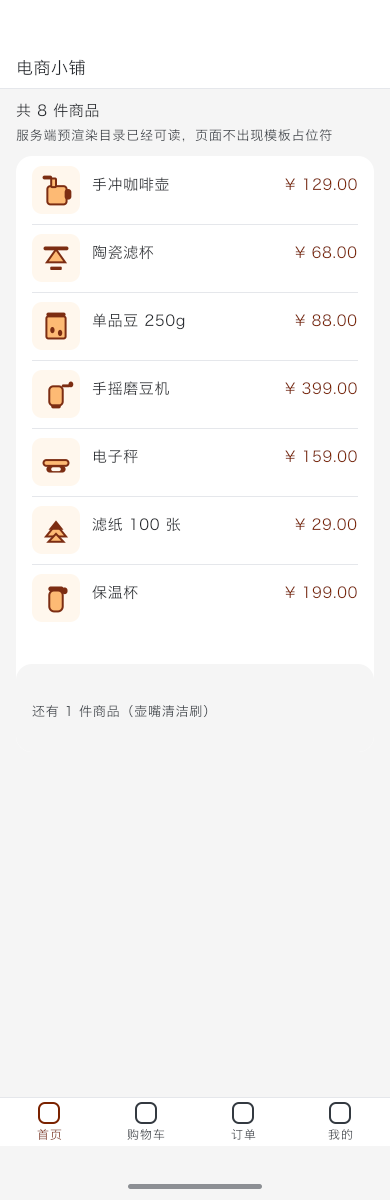
<style>
.page{position:relative;width:390px;height:1200px;background:#f5f5f5}
.page>*{position:absolute;margin:0}
.t1{font:17px "HiraginoSansGB-Regular";letter-spacing:0.03em;color:#1f2329}
.t2{font:15px "HiraginoSansGB-Regular";letter-spacing:0.04em;color:#26292f}
.t3{font:13px "HiraginoSansGB-Regular";letter-spacing:0.06em;color:#333940}
.t4{font:15px "HiraginoSansGB-Regular";letter-spacing:0.04em;color:#282b31}
.t5{font:15px "HiraginoSansGB-Regular";letter-spacing:0.04em;color:#7b2603}
.t6{font:15px "HiraginoSansGB-Regular";letter-spacing:0.04em;color:#23272c}
.t7{font:15px "HiraginoSansGB-Regular";letter-spacing:0.04em;color:#25282e}
.t8{font:15px "HiraginoSansGB-Regular";letter-spacing:0.04em;color:#2c2f34}
.t9{font:15px "HiraginoSansGB-Regular";letter-spacing:0.04em;color:#7c2705}
.t10{font:15px "HiraginoSansGB-Regular";letter-spacing:0.04em;color:#2d3035}
.t11{font:15px "HiraginoSansGB-Regular";letter-spacing:0.04em;color:#7b2604}
.t12{font:15px "HiraginoSansGB-Regular";letter-spacing:0.04em;color:#282c31}
.t13{font:15px "HiraginoSansGB-Regular";letter-spacing:0.04em;color:#24282d}
.t14{font:15px "HiraginoSansGB-Regular";letter-spacing:0.04em;color:#7b2502}
.t15{font:13px "HiraginoSansGB-Regular";letter-spacing:0.06em;color:#474c51}
.t16{font:12px "HiraginoSansGB-Regular";letter-spacing:0.08em}
.t17{font:12px "HiraginoSansGB-Regular";letter-spacing:0.08em;color:#43484e}
</style>
<div class="page">
<p class="t1" style="left:17px;top:59px;width:69px;height:18px">电商小铺</p>
<p class="t2" style="left:15px;top:103px;width:85px;height:16px">共 8 件商品</p>
<p class="t3" style="left:15px;top:128px;width:318px;height:15px">服务端预渲染目录已经可读，页面不出现模板占位符</p>
<p class="t4" style="left:91px;top:177px;width:79px;height:15px">手冲咖啡壶</p>
<p class="t5" style="left:284px;top:178px;width:74px;height:14px">¥ 129.00</p>
<p class="t6" style="left:92px;top:245px;width:63px;height:16px">陶瓷滤杯</p>
<p class="t5" style="left:294px;top:246px;width:64px;height:14px">¥ 68.00</p>
<p class="t7" style="left:91px;top:313px;width:95px;height:18px">单品豆 250g</p>
<p class="t5" style="left:294px;top:314px;width:64px;height:14px">¥ 88.00</p>
<p class="t8" style="left:91px;top:381px;width:79px;height:16px">手摇磨豆机</p>
<p class="t9" style="left:284px;top:382px;width:74px;height:14px">¥ 399.00</p>
<p class="t10" style="left:92px;top:449px;width:47px;height:16px">电子秤</p>
<p class="t11" style="left:284px;top:450px;width:74px;height:14px">¥ 159.00</p>
<p class="t12" style="left:91px;top:517px;width:91px;height:16px">滤纸 100 张</p>
<p class="t11" style="left:294px;top:518px;width:64px;height:14px">¥ 29.00</p>
<p class="t13" style="left:91px;top:585px;width:48px;height:16px">保温杯</p>
<p class="t14" style="left:284px;top:586px;width:74px;height:14px">¥ 199.00</p>
<p class="t15" style="left:31px;top:705px;width:178px;height:14px">还有 1 件商品（壶嘴清洁刷）</p>
<p class="t16" style="left:36px;top:1128px;width:27px;height:13px">首页</p>
<p class="t17" style="left:126px;top:1128px;width:40px;height:13px">购物车</p>
<p class="t16" style="left:230px;top:1129px;width:27px;height:12px">订单</p>
<p class="t16" style="left:327px;top:1129px;width:27px;height:12px">我的</p>
</div>
